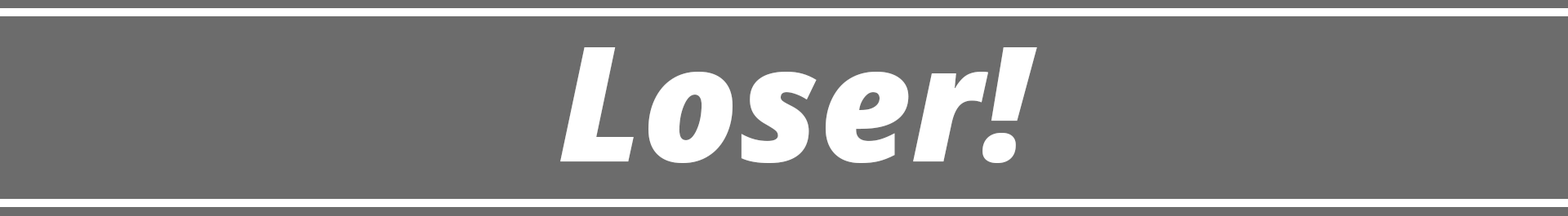
<style>
.page{position:relative;width:1568px;height:216px;background:#6c6c6c}
.page>*{position:absolute;margin:0}
.t1{font:159.9px "OpenSans-ExtraboldItalic";color:#ffffff}
</style>
<div class="page">
<p class="t1" style="left:560px;top:47px;width:477px;height:116px">Loser!</p>
</div>
